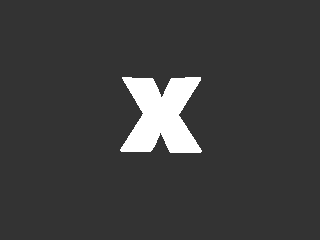
<style>
.page{position:relative;width:320px;height:240px;background:#333333}
.page>*{position:absolute;margin:0}
.t1{font:100px "BowlbyOneSC-Regular";letter-spacing:-0.05em;color:#ffffff}
</style>
<div class="page">
<p class="t1" style="left:120px;top:77px;width:82px;height:76px">X</p>
</div>
